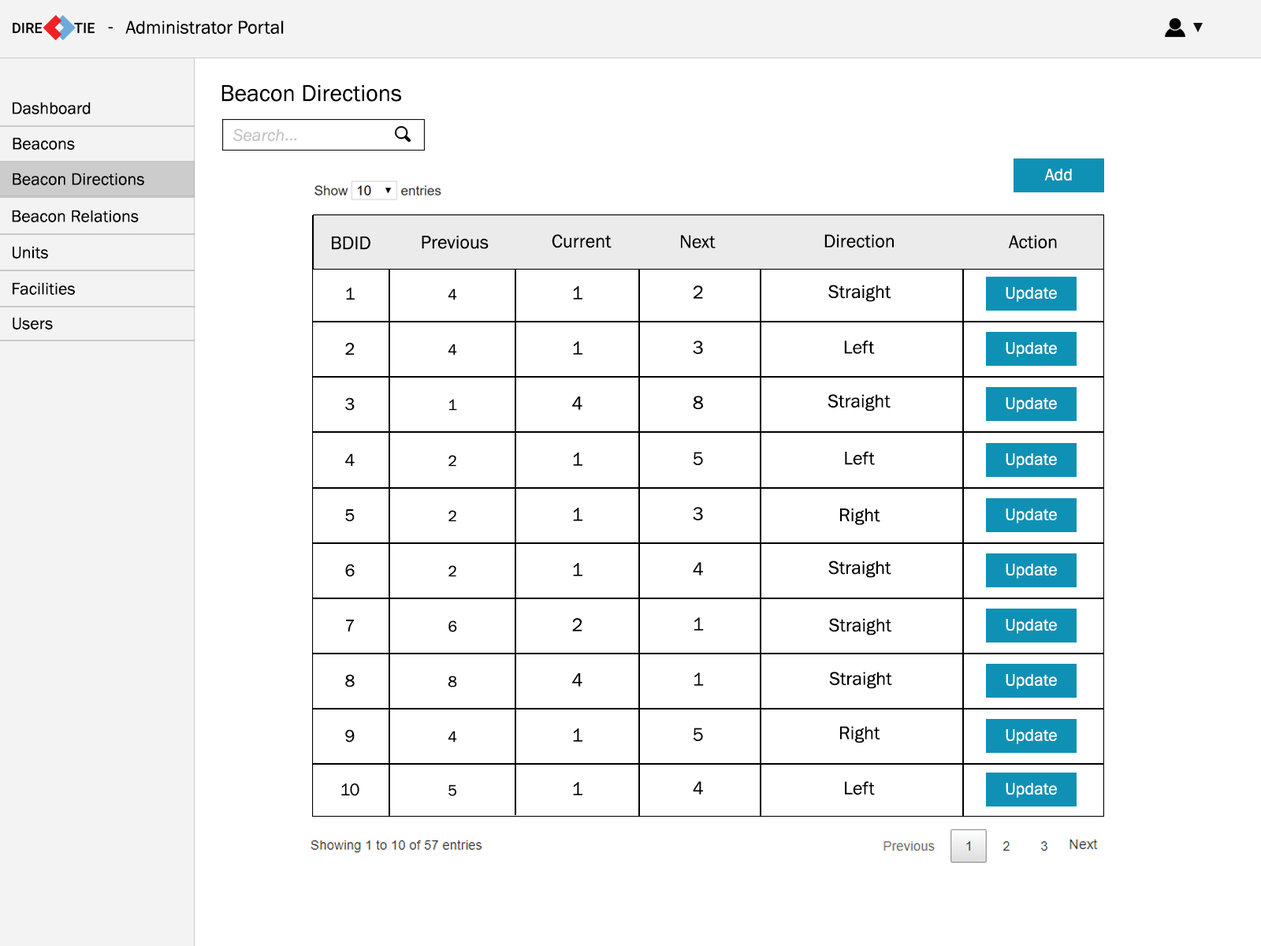
<style>
.page{position:relative;width:1261px;height:946px;background:#ffffff}
.page>*{position:absolute;margin:0}
.t1{font:18.9px "FranklinGothic-Book";color:#000000}
.t2{font:23.6px "FranklinGothic-Book";color:#000000}
.t3{font:17.3px "FranklinGothic-Book";color:#000000}
.t4{font:17.3px "FranklinGothic-Book";color:#ffffff}
.t5{font:15.8px "FranklinGothic-Book";color:#000000}
</style>
<div class="page">
<p class="t1" style="left:108px;top:27px;width:5px;height:1px">-</p>
<p class="t1" style="left:125px;top:20px;width:159px;height:14px">Administrator Portal</p>
<p class="t2" style="left:221px;top:85px;width:180px;height:17px">Beacon Directions</p>
<p class="t3" style="left:13px;top:102px;width:78px;height:12px">Dashboard</p>
<p class="t3" style="left:13px;top:137px;width:62px;height:13px">Beacons</p>
<p class="t3" style="left:13px;top:173px;width:131px;height:12px">Beacon Directions</p>
<p class="t4" style="left:1044px;top:169px;width:28px;height:11px">Add</p>
<p class="t3" style="left:12px;top:210px;width:127px;height:12px">Beacon Relations</p>
<p class="t3" style="left:13px;top:246px;width:35px;height:12px">Units</p>
<p class="t1" style="left:332px;top:236px;width:38px;height:14px">BDID</p>
<p class="t1" style="left:422px;top:236px;width:67px;height:13px">Previous</p>
<p class="t1" style="left:552px;top:234px;width:60px;height:14px">Current</p>
<p class="t1" style="left:681px;top:235px;width:35px;height:13px">Next</p>
<p class="t1" style="left:824px;top:234px;width:70px;height:14px">Direction</p>
<p class="t1" style="left:1008px;top:235px;width:49px;height:14px">Action</p>
<p class="t3" style="left:13px;top:282px;width:62px;height:13px">Facilities</p>
<p class="t3" style="left:346px;top:287px;width:9px;height:12px">1</p>
<p class="t5" style="left:448px;top:288px;width:9px;height:12px">4</p>
<p class="t1" style="left:573px;top:286px;width:9px;height:13px">1</p>
<p class="t1" style="left:694px;top:285px;width:9px;height:14px">2</p>
<p class="t1" style="left:828px;top:284px;width:63px;height:18px">Straight</p>
<p class="t4" style="left:1006px;top:287px;width:51px;height:15px">Update</p>
<p class="t3" style="left:13px;top:317px;width:40px;height:12px">Users</p>
<p class="t1" style="left:573px;top:341px;width:9px;height:14px">1</p>
<p class="t1" style="left:693px;top:340px;width:10px;height:14px">3</p>
<p class="t1" style="left:844px;top:340px;width:31px;height:14px">Left</p>
<p class="t3" style="left:345px;top:342px;width:10px;height:13px">2</p>
<p class="t5" style="left:448px;top:344px;width:9px;height:11px">4</p>
<p class="t4" style="left:1006px;top:342px;width:51px;height:15px">Update</p>
<p class="t3" style="left:345px;top:397px;width:10px;height:14px">3</p>
<p class="t5" style="left:449px;top:399px;width:8px;height:12px">1</p>
<p class="t1" style="left:572px;top:396px;width:10px;height:14px">4</p>
<p class="t1" style="left:693px;top:396px;width:10px;height:13px">8</p>
<p class="t1" style="left:827px;top:394px;width:64px;height:17px">Straight</p>
<p class="t4" style="left:1006px;top:397px;width:51px;height:15px">Update</p>
<p class="t3" style="left:345px;top:453px;width:10px;height:13px">4</p>
<p class="t5" style="left:448px;top:455px;width:8px;height:12px">2</p>
<p class="t1" style="left:573px;top:452px;width:9px;height:14px">1</p>
<p class="t1" style="left:693px;top:452px;width:10px;height:13px">5</p>
<p class="t1" style="left:845px;top:451px;width:30px;height:14px">Left</p>
<p class="t4" style="left:1006px;top:453px;width:51px;height:15px">Update</p>
<p class="t3" style="left:345px;top:509px;width:10px;height:13px">5</p>
<p class="t5" style="left:448px;top:510px;width:8px;height:12px">2</p>
<p class="t1" style="left:573px;top:508px;width:9px;height:13px">1</p>
<p class="t1" style="left:693px;top:507px;width:10px;height:13px">3</p>
<p class="t1" style="left:840px;top:508px;width:40px;height:17px">Right</p>
<p class="t4" style="left:1006px;top:508px;width:51px;height:15px">Update</p>
<p class="t3" style="left:345px;top:563px;width:10px;height:14px">6</p>
<p class="t5" style="left:448px;top:565px;width:8px;height:12px">2</p>
<p class="t1" style="left:573px;top:563px;width:9px;height:13px">1</p>
<p class="t1" style="left:693px;top:562px;width:10px;height:13px">4</p>
<p class="t1" style="left:828px;top:560px;width:63px;height:18px">Straight</p>
<p class="t4" style="left:1006px;top:563px;width:51px;height:15px">Update</p>
<p class="t1" style="left:572px;top:618px;width:10px;height:13px">2</p>
<p class="t1" style="left:694px;top:617px;width:10px;height:13px">1</p>
<p class="t1" style="left:829px;top:618px;width:62px;height:17px">Straight</p>
<p class="t3" style="left:346px;top:619px;width:8px;height:12px">7</p>
<p class="t5" style="left:448px;top:620px;width:9px;height:12px">6</p>
<p class="t4" style="left:1006px;top:619px;width:51px;height:15px">Update</p>
<p class="t3" style="left:345px;top:674px;width:10px;height:13px">8</p>
<p class="t5" style="left:448px;top:675px;width:9px;height:12px">8</p>
<p class="t1" style="left:572px;top:673px;width:10px;height:13px">4</p>
<p class="t1" style="left:694px;top:672px;width:10px;height:14px">1</p>
<p class="t1" style="left:829px;top:671px;width:63px;height:18px">Straight</p>
<p class="t4" style="left:1006px;top:674px;width:51px;height:15px">Update</p>
<p class="t1" style="left:840px;top:726px;width:40px;height:17px">Right</p>
<p class="t3" style="left:345px;top:729px;width:10px;height:13px">9</p>
<p class="t5" style="left:448px;top:731px;width:9px;height:11px">4</p>
<p class="t1" style="left:573px;top:728px;width:9px;height:14px">1</p>
<p class="t1" style="left:693px;top:727px;width:10px;height:14px">5</p>
<p class="t4" style="left:1006px;top:729px;width:51px;height:15px">Update</p>
<p class="t3" style="left:341px;top:783px;width:18px;height:13px">10</p>
<p class="t5" style="left:448px;top:784px;width:8px;height:12px">5</p>
<p class="t1" style="left:573px;top:782px;width:9px;height:13px">1</p>
<p class="t1" style="left:693px;top:781px;width:10px;height:13px">4</p>
<p class="t1" style="left:845px;top:781px;width:30px;height:14px">Left</p>
<p class="t4" style="left:1006px;top:783px;width:51px;height:15px">Update</p>
</div>
